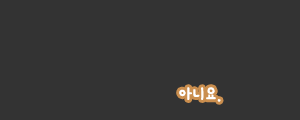
<style>
.page{position:relative;width:300px;height:120px;background:#333333}
.page>*{position:absolute;margin:0}
.t1{font:18px "KoreanCT-R";color:#ffffff}
</style>
<div class="page">
<p class="t1" style="left:179px;top:87px;width:42px;height:15px">아니요.</p>
</div>
